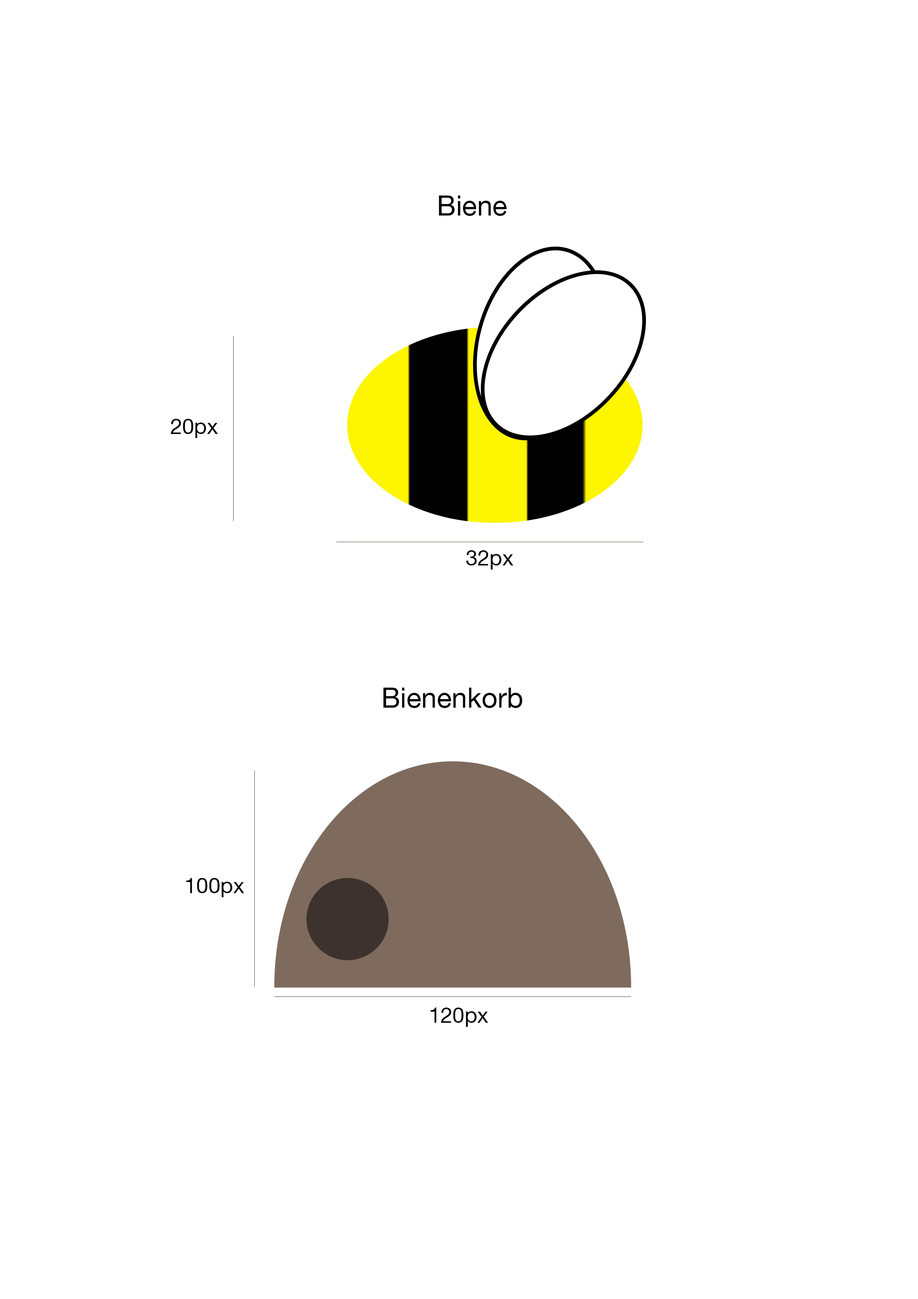
<style>
.page{position:relative;width:918px;height:1299px;background:#ffffff}
.page>*{position:absolute;margin:0}
.t1{font:27.8px "HelveticaNeue";color:#000000}
.t2{font:21.6px "HelveticaNeue";color:#000000}
</style>
<div class="page">
<p class="t1" style="left:439px;top:195px;width:68px;height:21px">Biene</p>
<p class="t2" style="left:171px;top:419px;width:47px;height:19px">20px</p>
<p class="t2" style="left:466px;top:550px;width:47px;height:19px">32px</p>
<p class="t1" style="left:383px;top:688px;width:139px;height:20px">Bienenkorb</p>
<p class="t2" style="left:186px;top:878px;width:58px;height:19px">100px</p>
<p class="t2" style="left:431px;top:1007px;width:57px;height:20px">120px</p>
</div>
